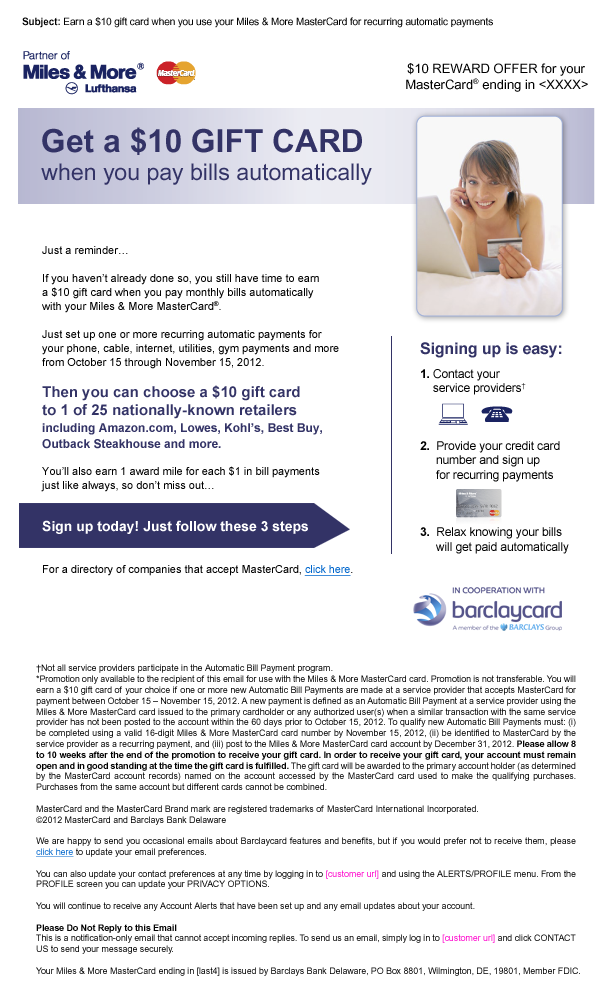
<style>
.page{position:relative;width:611px;height:1008px;background:#ffffff}
.page>*{position:absolute;margin:0}
.t1{font:10px "ArialMT";letter-spacing:-0.01em;color:#000000}
.t2{font:10px "ArialMT-Bold";letter-spacing:-0.01em;color:#000000}
.t3{font:13px "ArialMT";color:#000000}
.t4{font:23.2px "ArialMT";color:#333366}
.t5{font:31.7px/26.4px "ArialMT-Bold";color:#333366}
.t6{font:31.7px/26.4px "ArialMT";color:#333366}
.t7{font:11px/14px "ArialMT";color:#000000}
.t8{font:15px/18px "Arial-BoldMT";color:#333366}
.t9{font:12px/17px "Arial-BoldMT";color:#333366}
.t10{font:12px/16px "Arial-BoldMT";color:#333366}
.t11{font:14px/14px "Arial-BoldMT";color:#ffffff}
.t12{font:11px/14px "ArialMT";letter-spacing:-0.01em;color:#0066cc;text-decoration:underline}
.t13{font:12px "ArialMT";letter-spacing:-0.01em;color:#000000}
.t14{font:16px "Arial-BoldMT";letter-spacing:-0.01em;color:#333366}
.t15{font:12px/24px "Arial-BoldMT";letter-spacing:-0.01em;color:#000000}
.t16{font:12px/24px "ArialMT";letter-spacing:-0.01em;color:#000000}
.t17{font:12px "Arial-BoldMT";letter-spacing:-0.01em;color:#000000}
.t18{font:9px "ArialMT";letter-spacing:-0.01em;color:#000000}
.t19{font:9px "ArialMT-Bold";letter-spacing:-0.01em;color:#000000}
.t20{font:9px "ArialMT";letter-spacing:-0.01em;color:#0066cc;text-decoration:underline}
.t21{font:9px "ArialMT";letter-spacing:-0.01em;color:#ff00cc}
</style>
<div class="page">
<p class="t1" style="left:22px;top:17px;width:471px;height:11px"><span class="t2">Subject:</span> Earn a $10 gift card when you use your Miles &amp; More MasterCard for recurring automatic payments</p>
<p class="t3" style="left:406px;top:63px;width:182px;height:29px;text-align:right">$10 REWARD OFFER for your <br>MasterCard® ending in &lt;XXXX&gt;</p>
<p class="t4" style="left:41px;top:127px;width:331px;height:58px"><span class="t5">Get a $10 GIFT CARD</span><span class="t6"> <br></span>when you pay bills automatically</p>
<p class="t7" style="left:41px;top:246px;width:312px;height:330px">Just a reminder…<br><br>If you haven’t already done so, you still have time to earn <br>a $10 gift card when you pay monthly bills automatically <br>with your Miles &amp; More MasterCard®.<br><br>Just set up one or more recurring automatic payments for <br>your phone, cable, internet, utilities, gym payments and more <br>from October 15 through November 15, 2012.<br><br><span class="t8">Then you can choose a $10 gift card <br>to 1 of 25 nationally-known retailers <br></span><span class="t9">including Amazon.com, Lowes, Kohl’s, Best Buy, <br></span><span class="t10">Outback Steakhouse and more.<br><br></span>You’ll also earn 1 award mile for each $1 in bill payments <br>just like always, so don’t miss out…<br><br><br><span class="t11">Sign up today! Just follow these 3 steps<br></span><br><br>For a directory of companies that accept MasterCard, <span class="t12">click here</span>.</p>
<p class="t13" style="left:420px;top:342px;width:149px;height:212px;text-align:justify"><span class="t14">Signing up is easy:<br></span><span class="t15">1.</span><span class="t16"> Contact your <br></span>    service providers†<br><br><br><br><span class="t17">2.</span>  Provide your credit card <br>     number and sign up <br>     for recurring payments<br><br><br><br><span class="t17">3.</span>  Relax knowing your bills <br>     will get paid automatically</p>
<p class="t18" style="left:36px;top:664px;width:544px;height:312px;text-align:justify">†Not all service providers participate in the Automatic Bill Payment program.<br>*Promotion only available to the recipient of this email for use with the Miles &amp; More MasterCard card. Promotion is not transferable. You will earn a $10 gift card of your choice if one or more new Automatic Bill Payments are made at a service provider that accepts MasterCard for payment between October 15 – November 15, 2012. A new payment is defined as an Automatic Bill Payment at a service provider using the Miles &amp; More MasterCard card issued to the primary cardholder or any authorized user(s) when a similar transaction with the same service provider has not been posted to the account within the 60 days prior to October 15, 2012. To qualify new Automatic Bill Payments must: (i) be completed using a valid 16-digit Miles &amp; More MasterCard card number by November 15, 2012, (ii) be identified to MasterCard by the service provider as a recurring payment, and (iii) post to the Miles &amp; More MasterCard card account by December 31, 2012. <span class="t19">Please allow 8 to 10 weeks after the end of the promotion to receive your gift card. In order to receive your gift card, your account must remain open and in good standing at the time the gift card is fulfilled. </span>The gift card will be awarded to the primary account holder (as determined by the MasterCard account records) named on the account accessed by the MasterCard card used to make the qualifying purchases. Purchases from the same account but different cards cannot be combined. <br> <br>MasterCard and the MasterCard Brand mark are registered trademarks of MasterCard International Incorporated.<br>©2012 MasterCard and Barclays Bank Delaware<br><br>We are happy to send you occasional emails about Barclaycard features and benefits, but if you would prefer not to receive them, please <span class="t20">click here</span> to update your email preferences.<br><br>You can also update your contact preferences at any time by logging in to<span class="t21"> [customer url] </span>and using the ALERTS/PROFILE menu. From the PROFILE screen you can update your PRIVACY OPTIONS.<br><br>You will continue to receive any Account Alerts that have been set up and any email updates about your account.<br><br><span class="t19">Please Do Not Reply to this Email<br></span>This is a notification-only email that cannot accept incoming replies. To send us an email, simply log in to <span class="t21">[customer url] </span>and click CONTACT US to send your message securely.<br><br>Your Miles &amp; More MasterCard ending in [last4] is issued by Barclays Bank Delaware, PO Box 8801, Wilmington, DE, 19801, Member FDIC.</p>
</div>
